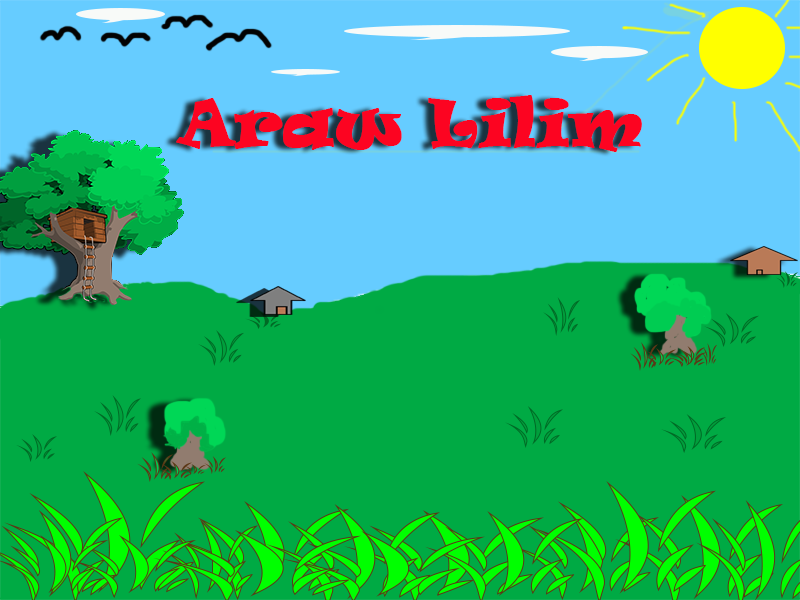
<style>
.page{position:relative;width:800px;height:600px;background:#00aa44}
.page>*{position:absolute;margin:0}
.t1{font:60px "Ravie";color:#fc0421;font-weight:bold}
</style>
<div class="page">
<p class="t1" style="left:176px;top:95px;width:466px;height:57px">Araw Lilim</p>
</div>
